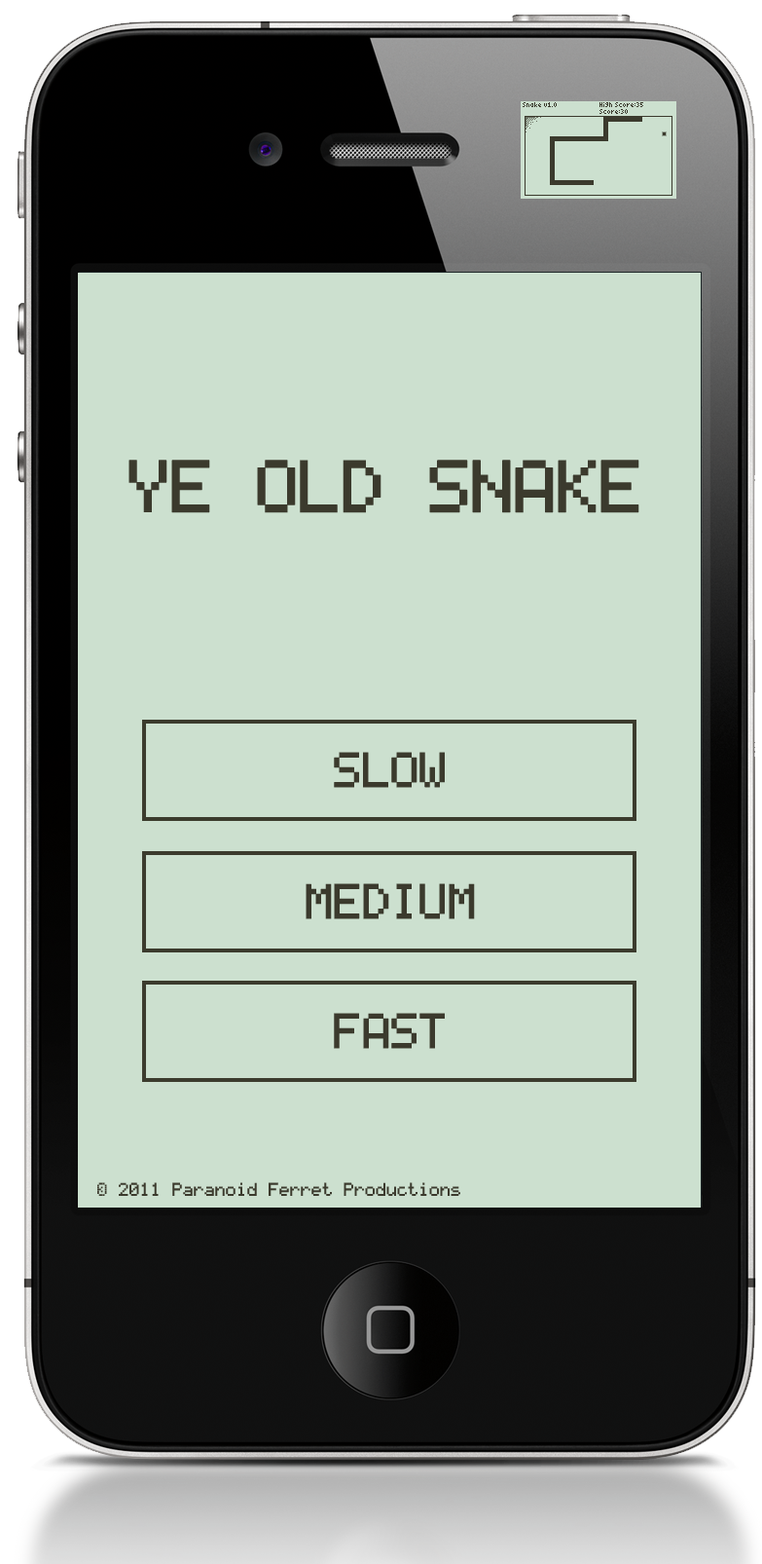
<style>
.page{position:relative;width:762px;height:1564px;background:#cce0cf}
.page>*{position:absolute;margin:0}
.t1{font:70.1px "LCDSolid";color:#3b3a2d}
.t2{font:46.7px "LCDSolid";color:#3b3a2d}
.t3{font:17.5px "LCDSolid";color:#3b3a2d}
</style>
<div class="page">
<p class="t1" style="left:129px;top:460px;width:511px;height:53px">YE OLD SNAKE</p>
<p class="t2" style="left:334px;top:752px;width:111px;height:36px">SLOW</p>
<p class="t2" style="left:306px;top:883px;width:169px;height:36px">MEDIUM</p>
<p class="t2" style="left:334px;top:1013px;width:111px;height:36px">FAST</p>
<p class="t3" style="left:97px;top:1182px;width:364px;height:14px">© 2011 Paranoid Ferret Productions</p>
</div>
